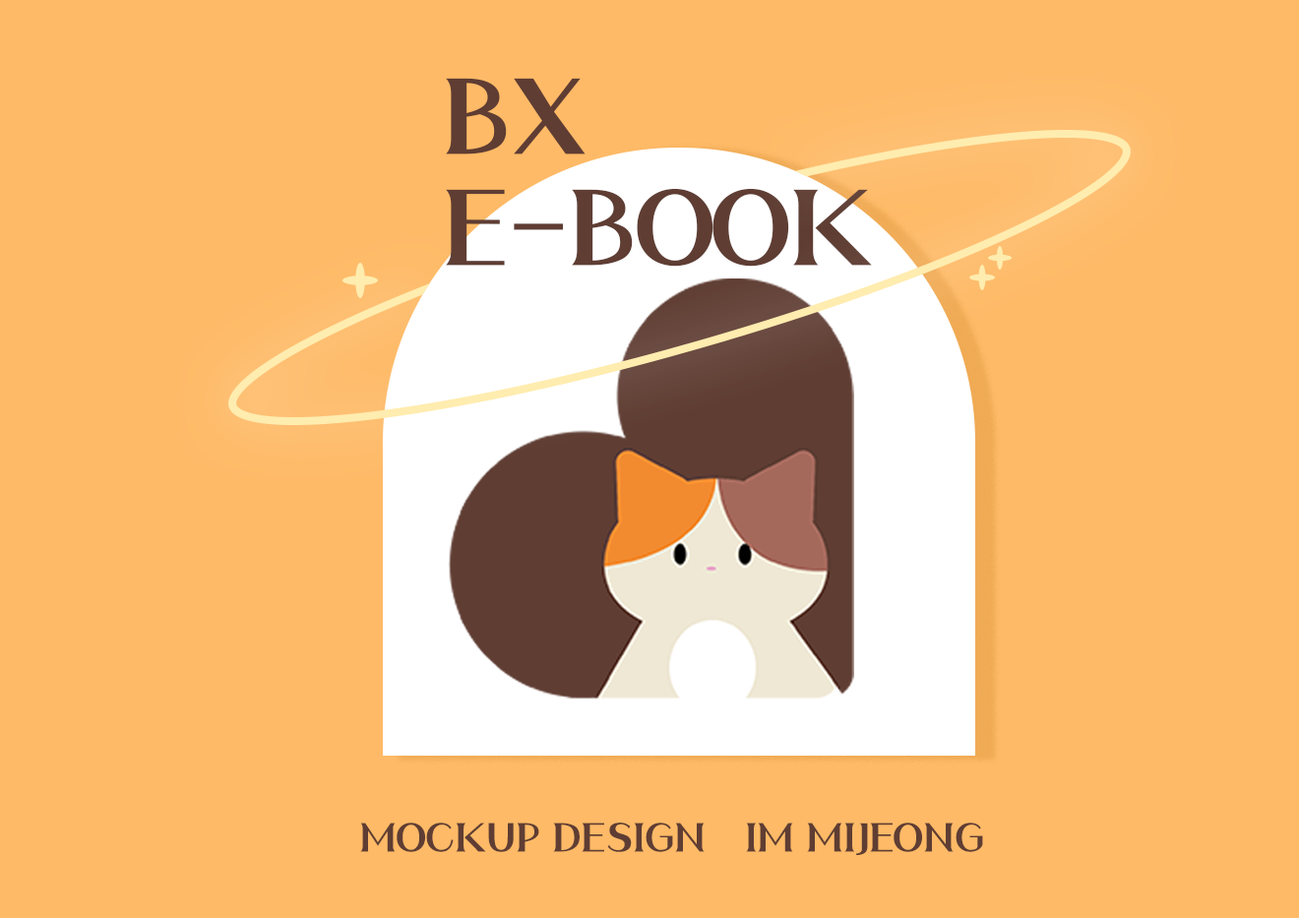
<style>
.page{position:relative;width:1299px;height:918px;background:#feba67}
.page>*{position:absolute;margin:0}
.t1{font:104.5px/111.4px "HSBombaram21";color:#5f3d33}
.t2{font:39.4px "HSBombaram21";color:#5f3d33}
</style>
<div class="page">
<p class="t1" style="left:446px;top:78px;width:426px;height:189px">BX<br>E-BOOK</p>
<p class="t2" style="left:360px;top:823px;width:345px;height:29px">MOCKUP DESIGN</p>
<p class="t2" style="left:746px;top:823px;width:237px;height:32px">IM MIJEONG</p>
</div>
